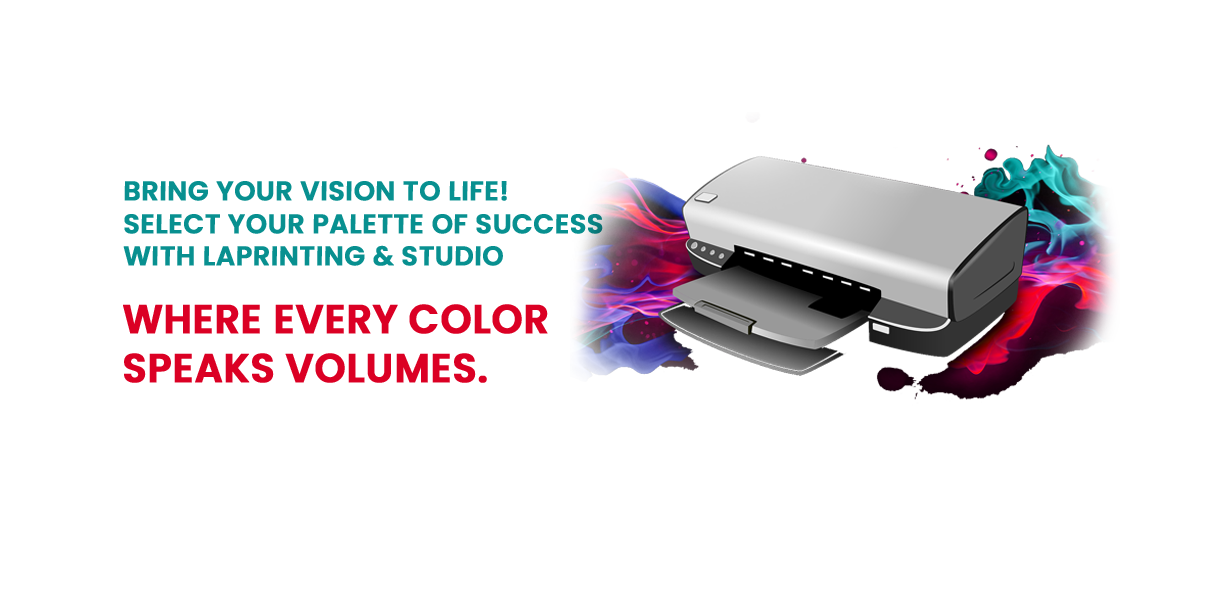
<style>
.page{position:relative;width:1230px;height:609px;background:#ffffff}
.page>*{position:absolute;margin:0}
.t1{font:26.8px "Poppins-SemiBold";color:#088f8f;text-transform:uppercase;font-weight:bold}
.t2{font:40.6px "Poppins-SemiBold";color:#db0024;text-transform:uppercase;font-weight:bold;scale:0.97 1}
</style>
<div class="page">
<p class="t1" style="left:123px;top:181px;width:480px;height:85px">Bring Your Vision to Life! <br>Select Your Palette of Success with LaPrinting &amp; Studio</p>
<p class="t2" style="left:123px;top:304px;width:425px;height:79px">Where Every Color <br>Speaks Volumes.</p>
</div>
